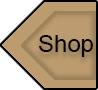
<style>
.page{position:relative;width:98px;height:90px;background:#bc9c6e}
.page>*{position:absolute;margin:0}
.t1{font:24px "ArialMT";color:#000000}
</style>
<div class="page">
<p class="t1" style="left:39px;top:35px;width:54px;height:22px">Shop</p>
</div>
